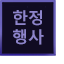
<style>
.page{position:relative;width:64px;height:64px;background:#100b22}
.page>*{position:absolute;margin:0}
.t1{font:16px "MalgunGothicBold";color:#8d84cb}
</style>
<div class="page">
<p class="t1" style="left:13px;top:10px;width:31px;height:35px">한정<br>행사</p>
</div>
